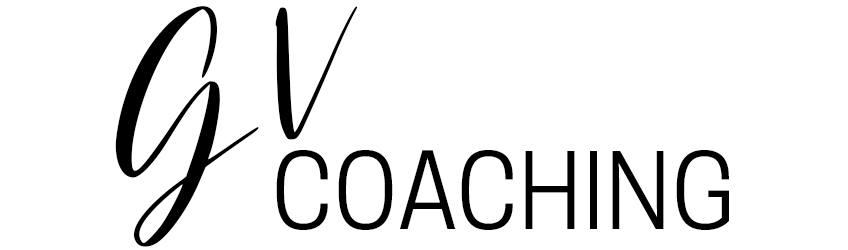
<style>
.page{position:relative;width:848px;height:250px;background:#ffffff}
.page>*{position:absolute;margin:0}
.t1{font:260px "TheSunshine";color:#000000}
.t2{font:160px "TheSunshine";color:#000000}
.t3{font:100px "CooperHewitt-Book";color:#000000}
</style>
<div class="page">
<p class="t1" style="left:115px;top:6px;width:144px;height:241px">G</p>
<p class="t2" style="left:275px;top:6px;width:83px;height:134px">V</p>
<p class="t3" style="left:276px;top:150px;width:453px;height:80px">COACHING</p>
</div>
